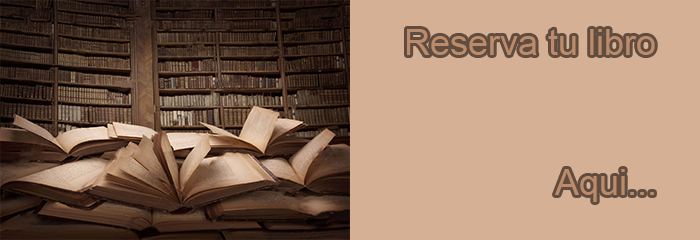
<style>
.page{position:relative;width:700px;height:240px;background:#d6b095}
.page>*{position:absolute;margin:0}
.t1{font:36px "ArialMT";color:#b07a54}
</style>
<div class="page">
<p class="t1" style="left:407px;top:29px;width:248px;height:26px;opacity:0.7">Reserva tu libro</p>
</div>
